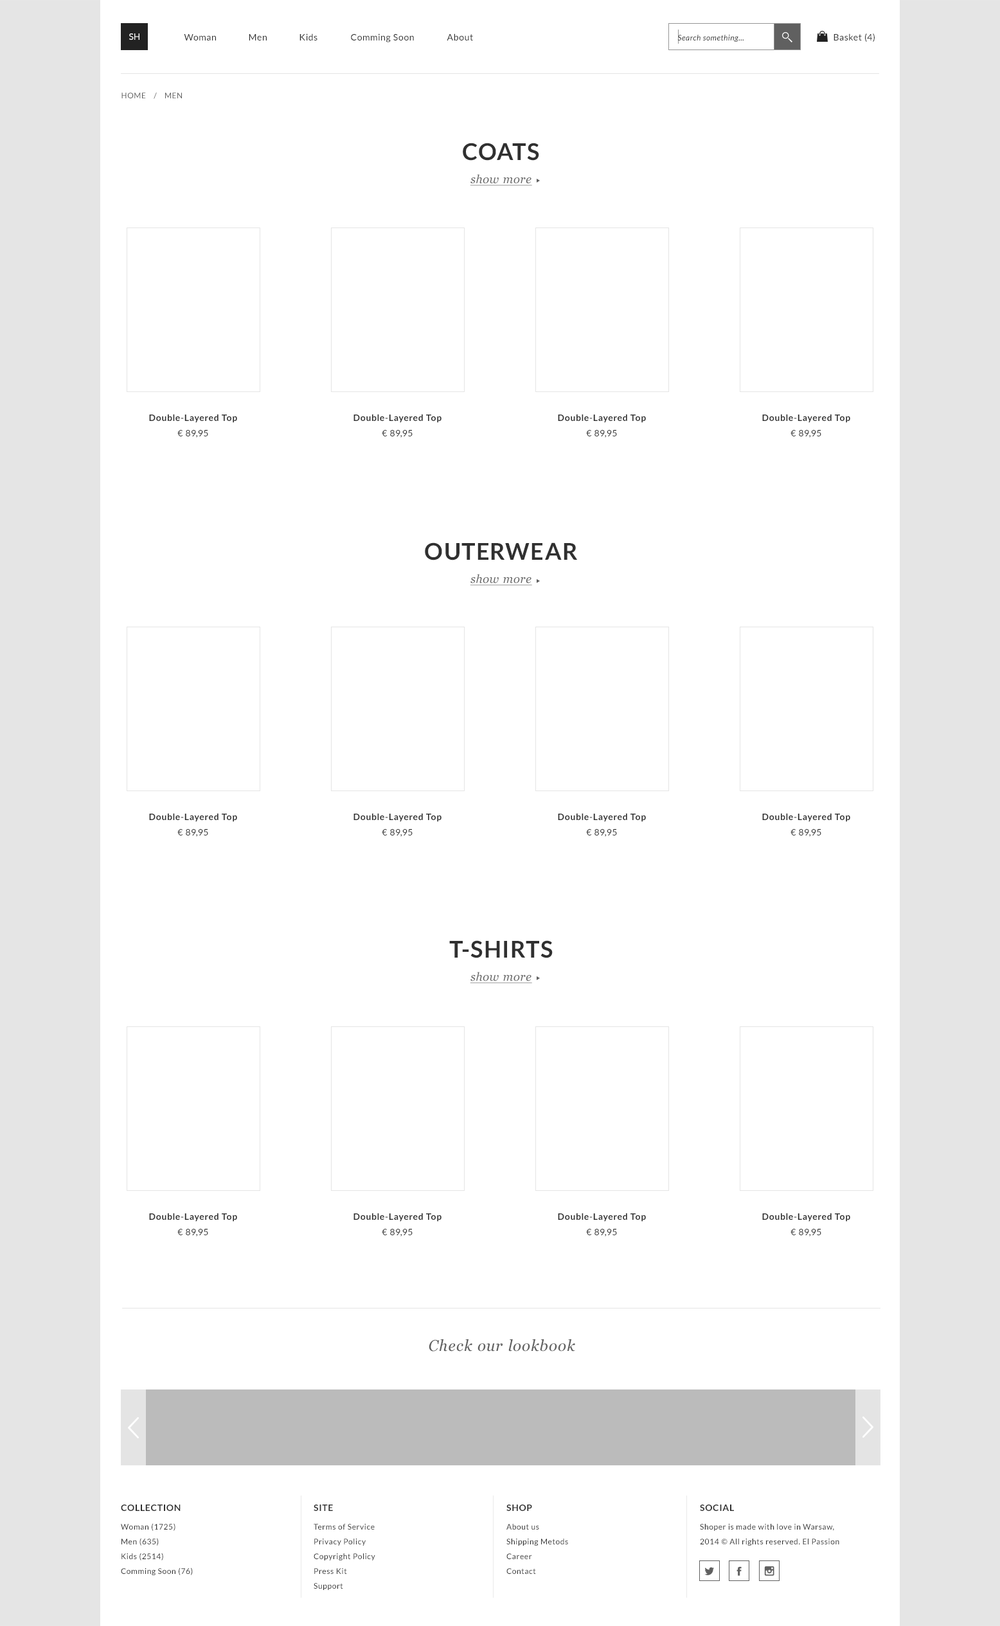
<style>
.page{position:relative;width:1000px;height:1626px;background:#ffffff}
.page>*{position:absolute;margin:0}
.t1{font:9px "Lato-Regular";color:#ffffff;text-transform:uppercase}
.t2{font:9px "Lato-Regular";letter-spacing:0.05em;color:#303030}
.t3{font:7.7px "Lato-Italic";letter-spacing:0.05em;color:#303030}
.t4{font:7.7px "Lato-Regular";letter-spacing:0.05em;color:#606060;text-transform:uppercase}
.t5{font:11.6px/23.1px "Georgia-Italic";letter-spacing:0.05em;color:#606060;text-decoration:underline}
.t6{font:23.1px/23.1px "Lato-Bold";letter-spacing:0.05em;color:#303030;text-transform:uppercase}
.t7{font:9px/15.4px "Lato-Bold";letter-spacing:0.05em;color:#303030}
.t8{font:9px/15.4px "Lato-Regular";letter-spacing:0.05em;color:#303030}
.t9{font:15.4px "Georgia-Italic";letter-spacing:0.05em;color:#606060}
.t10{font:9px "Lato-Bold";letter-spacing:0.05em;color:#303030;text-transform:uppercase}
.t11{font:7.7px/14.8px "Lato-Regular";letter-spacing:0.05em;color:#303030}
</style>
<div class="page">
<p class="t1" style="left:129px;top:33px;width:11px;height:7px">sh</p>
<p class="t2" style="left:184px;top:34px;width:32px;height:7px">Woman</p>
<p class="t2" style="left:249px;top:34px;width:18px;height:7px">Men</p>
<p class="t2" style="left:300px;top:33px;width:18px;height:8px">Kids</p>
<p class="t2" style="left:351px;top:33px;width:63px;height:9px">Comming Soon</p>
<p class="t2" style="left:447px;top:33px;width:26px;height:8px">About</p>
<p class="t3" style="left:678px;top:35px;width:66px;height:7px">Search something...</p>
<p class="t2" style="left:834px;top:33px;width:41px;height:9px">Basket (4)</p>
<p class="t4" style="left:122px;top:93px;width:60px;height:6px">HOME    /    Men</p>
<p class="t5" style="left:463px;top:143px;width:76px;height:43px;text-align:center"><span class="t6">Coats<br></span>show more</p>
<p class="t7" style="left:149px;top:414px;width:88px;height:24px;text-align:center">Double-Layered Top<br><span class="t8">€ 89,95</span></p>
<p class="t7" style="left:354px;top:414px;width:88px;height:24px;text-align:center">Double-Layered Top<br><span class="t8">€ 89,95</span></p>
<p class="t7" style="left:558px;top:414px;width:88px;height:24px;text-align:center">Double-Layered Top<br><span class="t8">€ 89,95</span></p>
<p class="t7" style="left:762px;top:414px;width:89px;height:24px;text-align:center">Double-Layered Top<br><span class="t8">€ 89,95</span></p>
<p class="t6" style="left:425px;top:543px;width:152px;height:43px;text-align:center">Outerwear<br><span class="t5">show more</span></p>
<p class="t7" style="left:149px;top:813px;width:88px;height:24px;text-align:center">Double-Layered Top<br><span class="t8">€ 89,95</span></p>
<p class="t7" style="left:354px;top:813px;width:88px;height:24px;text-align:center">Double-Layered Top<br><span class="t8">€ 89,95</span></p>
<p class="t7" style="left:558px;top:813px;width:88px;height:24px;text-align:center">Double-Layered Top<br><span class="t8">€ 89,95</span></p>
<p class="t7" style="left:762px;top:813px;width:89px;height:24px;text-align:center">Double-Layered Top<br><span class="t8">€ 89,95</span></p>
<p class="t5" style="left:449px;top:941px;width:104px;height:43px;text-align:center"><span class="t6">T-shirts<br></span>show more</p>
<p class="t7" style="left:149px;top:1213px;width:88px;height:24px;text-align:center">Double-Layered Top<br><span class="t8">€ 89,95</span></p>
<p class="t7" style="left:354px;top:1213px;width:88px;height:24px;text-align:center">Double-Layered Top<br><span class="t8">€ 89,95</span></p>
<p class="t7" style="left:558px;top:1213px;width:88px;height:24px;text-align:center">Double-Layered Top<br><span class="t8">€ 89,95</span></p>
<p class="t7" style="left:762px;top:1213px;width:89px;height:24px;text-align:center">Double-Layered Top<br><span class="t8">€ 89,95</span></p>
<p class="t9" style="left:429px;top:1339px;width:146px;height:13px">Check our lookbook</p>
<p class="t10" style="left:121px;top:1505px;width:60px;height:6px">Collection</p>
<p class="t10" style="left:314px;top:1505px;width:19px;height:6px">site</p>
<p class="t10" style="left:507px;top:1505px;width:25px;height:6px">Shop</p>
<p class="t10" style="left:700px;top:1505px;width:34px;height:6px">social</p>
<p class="t11" style="left:121px;top:1524px;width:72px;height:52px">Woman (1725)<br>Men (635)<br>Kids (2514)<br>Comming Soon (76)</p>
<p class="t11" style="left:314px;top:1524px;width:61px;height:66px">Terms of Service <br>Privacy Policy <br>Copyright Policy <br>Press Kit <br>Support</p>
<p class="t11" style="left:507px;top:1524px;width:61px;height:50px">About us<br>Shipping Metods<br>Career<br>Contact</p>
<p class="t11" style="left:700px;top:1524px;width:140px;height:22px">Shoper is made with love in Warsaw, <br>2014 © All rights reserved. El Passion</p>
</div>
